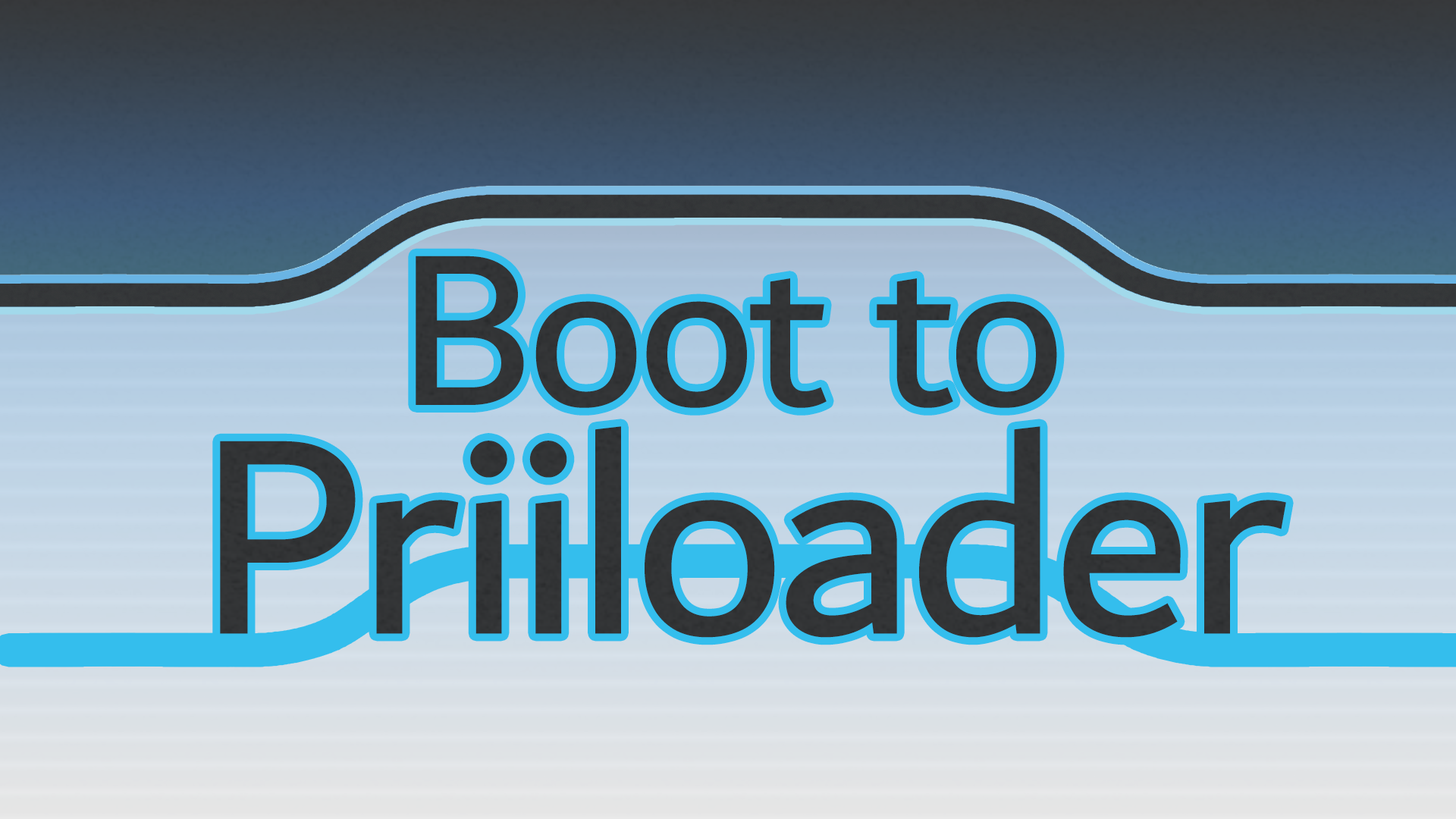
<style>
.page{position:relative;width:1456px;height:819px}
.page>*{position:absolute;margin:0}
.t1{font:229.4px "Dubai-Regular";letter-spacing:-0.025em;color:#323436}
.t2{font:296.8px "Dubai-Regular";letter-spacing:-0.025em;color:#323435}
</style>
<div class="page">
<p class="t1" style="left:416px;top:256px;width:641px;height:152px">Boot to</p>
<p class="t2" style="left:220px;top:426px;width:1066px;height:212px">Priiloader</p>
</div>
